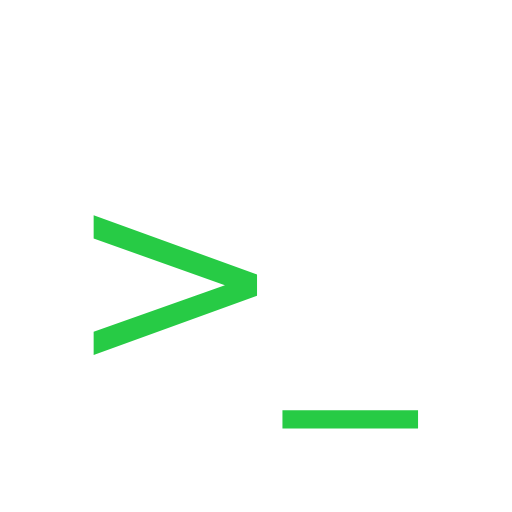
<style>
.page{position:relative;width:512px;height:512px;background:#ffffff}
.page>*{position:absolute;margin:0}
.t1{font:261px "monospace";color:#27cb45}
</style>
<div class="page">
<p class="t1" style="left:93px;top:215px;width:326px;height:214px">&gt;_</p>
</div>
